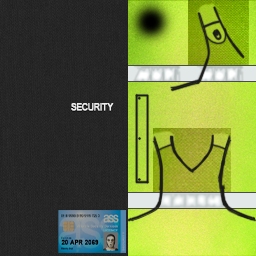
<style>
.page{position:relative;width:256px;height:256px}
.page>*{position:absolute;margin:0}
.t1{font:9.7px "ArialNarrow";font-weight:bold}
.t2{font:9.7px "ArialNarrow";color:#ececec;font-weight:bold}
</style>
<div class="page">
<p class="t1" style="left:71px;top:104px;width:43px;height:8px">SECURITY</p>
<p class="t2" style="left:71px;top:103px;width:43px;height:8px">SECURITY</p>
</div>
